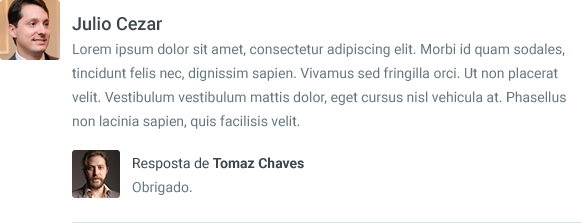
<style>
.page{position:relative;width:582px;height:223px;background:#ffffff}
.page>*{position:absolute;margin:0}
.t1{font:14px/24px "Roboto-Regular";color:#667780}
.t2{font:18px/24px "Roboto-Medium";color:#3d474d}
.t3{font:14px/24px "Roboto-Bold";color:#3d474d}
.t4{font:14px/24px "Roboto-Regular";color:#3d474d}
</style>
<div class="page">
<p class="t1" style="left:72px;top:16px;width:494px;height:113px"><span class="t2">Julio Cezar<br></span>Lorem ipsum dolor sit amet, consectetur adipiscing elit. Morbi id quam sodales, tincidunt felis nec, dignissim sapien. Vivamus sed fringilla orci. Ut non placerat velit. Vestibulum vestibulum mattis dolor, eget cursus nisl vehicula at. Phasellus non lacinia sapien, quis facilisis velit.</p>
<p class="t3" style="left:132px;top:157px;width:172px;height:38px"><span class="t4">Resposta de </span>Tomaz Chaves<br><span class="t1">Obrigado.</span></p>
</div>
